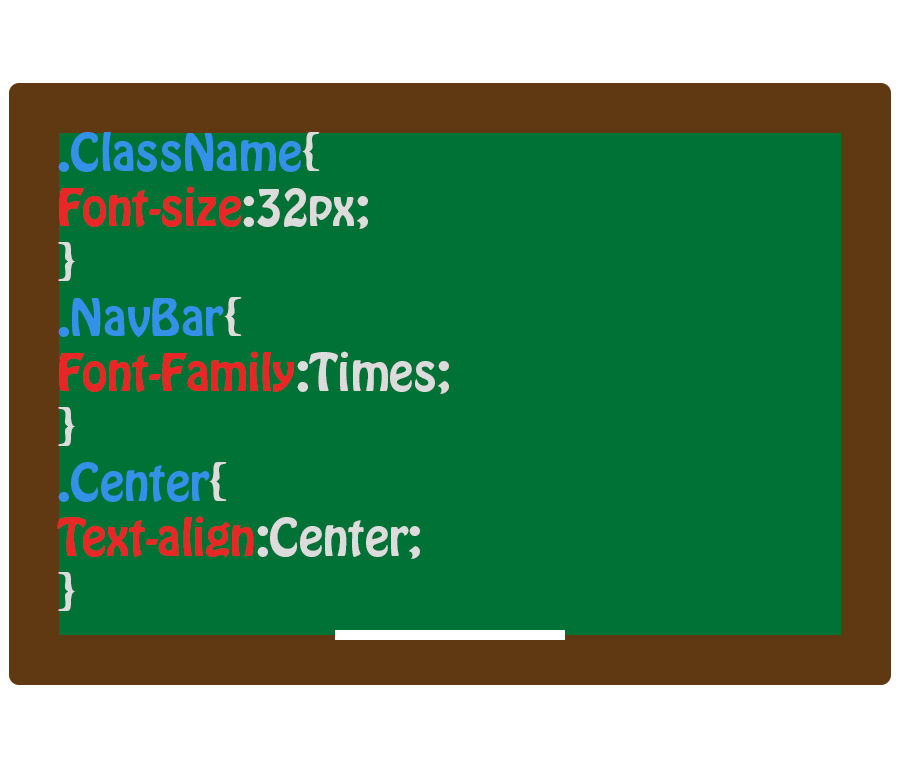
<style>
.page{position:relative;width:900px;height:768px;background:#007236}
.page>*{position:absolute;margin:0}
.t1{font:45.8px "HoboStd";color:#e92626}
.t2{font:45.8px "HoboStd";color:#3391e8}
.t3{font:45.8px "HoboStd";color:#dcdcdc}
.t4{font:45.8px "HoboStd";color:#ea2727}
</style>
<div class="page">
<p class="t1" style="left:57px;top:132px;width:392px;height:479px"><span class="t2">.ClassName</span><span class="t3">{<br></span><span class="t4">Font-size</span><span class="t3">:32px;<br>}<br></span><span class="t2">.NavBar</span><span class="t3">{<br></span>Font-Family<span class="t3">:Times;<br>}<br></span><span class="t2">.Center</span><span class="t3">{<br></span><span class="t4">Text-align</span><span class="t3">:Center;<br>}</span></p>
</div>
